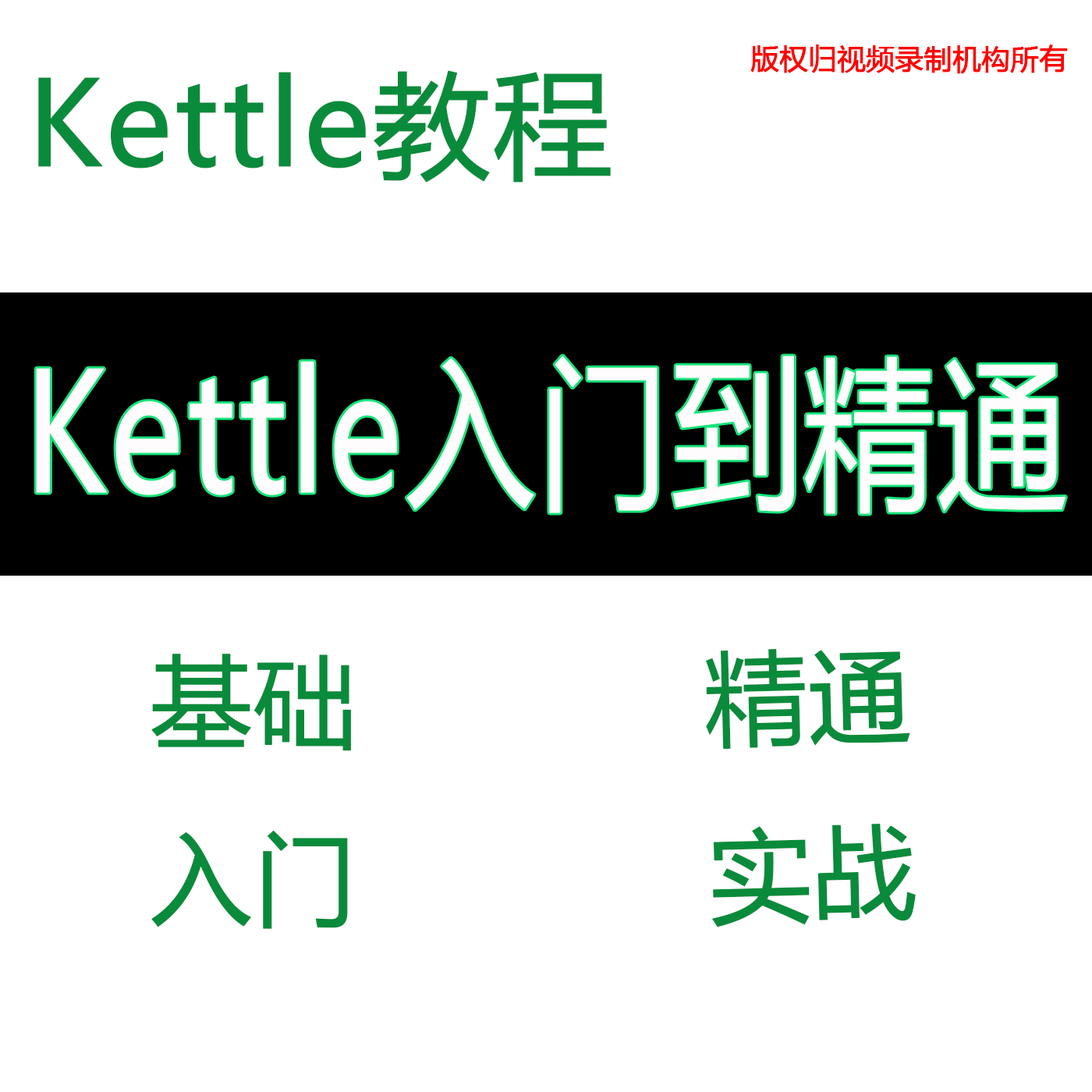
<style>
.page{position:relative;width:1092px;height:1092px;background:#ffffff}
.page>*{position:absolute;margin:0}
.t1{font:28.1px "MicrosoftYaHei";color:#ff0101;font-weight:bold}
.t2{font:117.1px "MicrosoftYaHei";color:#098b3b;font-weight:bold}
.t3{font:163.3px "MicrosoftYaHei";color:#fefcfc;font-weight:bold;scale:0.79 1}
.t4{font:101.4px "MicrosoftYaHei";color:#098b3b;font-weight:bold}
</style>
<div class="page">
<p class="t1" style="left:750px;top:44px;width:318px;height:30px">版权归视频录制机构所有</p>
<p class="t2" style="left:38px;top:70px;width:573px;height:113px">Kettle教程</p>
<p class="t3" style="left:36px;top:356px;width:1029px;height:158px">Kettle入门到精通</p>
<p class="t4" style="left:151px;top:654px;width:200px;height:275px">基础<br>入门</p>
<p class="t4" style="left:705px;top:649px;width:211px;height:278px;rotate:-1deg">精通<br>实战</p>
</div>
